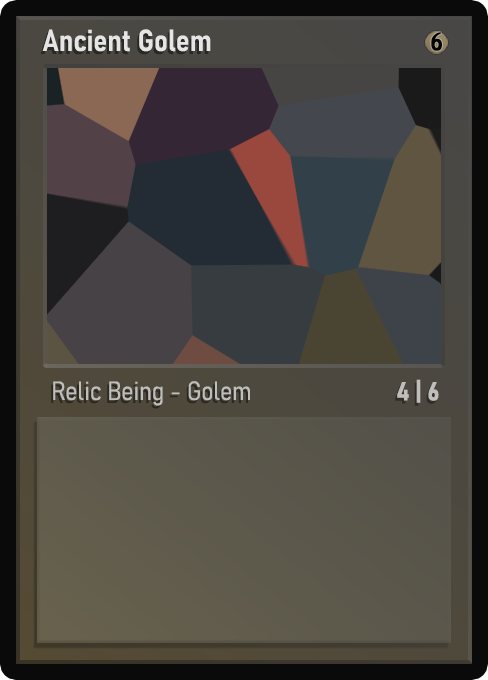
<style>
.page{position:relative;width:488px;height:680px}
.page>*{position:absolute;margin:0}
.t1{font:30px "Bahnschrift-SemiBoldSemiCondensed";color:#f2f2f2;font-weight:bold}
.t2{font:25px "WTRRoycroft";color:#000000;font-weight:bold;scale:1.09 1}
.t3{font:26px "Bahnschrift-LightSemiCondensed";color:#c8c8c8;font-weight:bold}
.t4{font:26px "Bahnschrift-BoldSemiCondensed";color:#bfbebd;font-weight:bold}
</style>
<div class="page">
<p class="t1" style="left:42px;top:29px;width:169px;height:23px;opacity:0.9">Ancient Golem</p>
<p class="t2" style="left:431px;top:32px;width:11px;height:19px">6</p>
<p class="t3" style="left:53px;top:381px;width:197px;height:25px;opacity:0.9">Relic Being - Golem</p>
<p class="t4" style="left:397px;top:379px;width:42px;height:24px">4 | 6</p>
</div>
